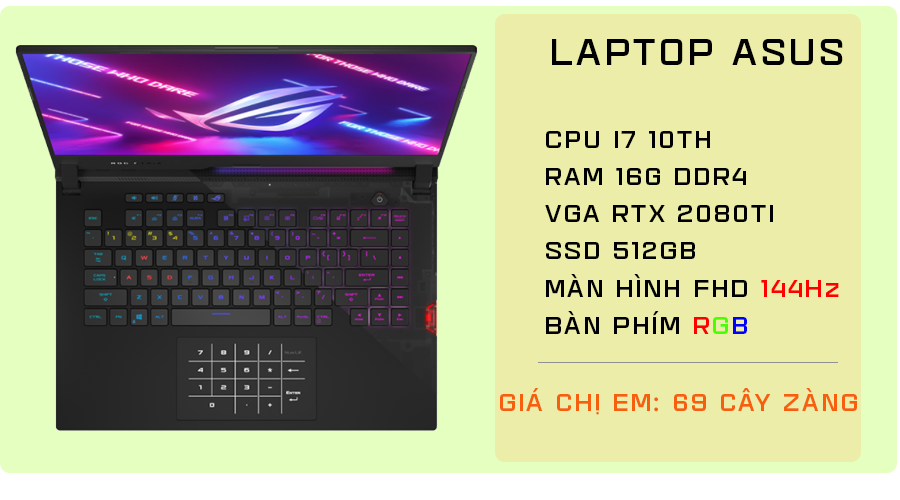
<style>
.page{position:relative;width:900px;height:500px;background:#ebeda8}
.page>*{position:absolute;margin:0}
.t1{font:36px "SVN-AgudaBlack";letter-spacing:0.1em;color:#000000}
.t2{font:24px/37.2px "SVN-AgudaBlack";letter-spacing:0.1em;color:#000000}
.t3{font:24px/37.2px "SVN-AgudaBlack";letter-spacing:0.1em;color:#ff0000}
.t4{font:24px/37.2px "SVN-AgudaBlack";letter-spacing:0.1em;color:#fe0000}
.t5{font:24px/37.2px "SVN-AgudaBlack";letter-spacing:0.1em;color:#48fe00}
.t6{font:24px/37.2px "SVN-AgudaBlack";letter-spacing:0.1em;color:#0000ff}
.t7{font:24px "SVN-AgudaBlack";letter-spacing:0.1em;color:#f55f0d}
</style>
<div class="page">
<p class="t1" style="left:552px;top:39px;width:291px;height:26px">LAPTOP ASUS</p>
<p class="t2" style="left:545px;top:131px;width:294px;height:203px">CPU I7 10TH<br>RAM 16G DDR4<br>VGA RTX 2080TI<br>SSD 512GB<br>MÀN HÌNH FHD <span class="t3">144Hz<br></span>BÀN PHÍM <span class="t4">R</span><span class="t5">G</span><span class="t6">B</span></p>
<p class="t7" style="left:500px;top:388px;width:357px;height:27px">GIÁ CHỊ EM: 69 CÂY ZÀNG</p>
</div>
